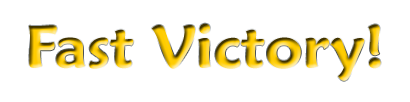
<style>
.page{position:relative;width:410px;height:102px;background:#ffffff}
.page>*{position:absolute;margin:0}
.t1{font:60px "MaiandraGD-DemiBold"}
</style>
<div class="page">
<p class="t1" style="left:29px;top:23px;width:352px;height:58px">Fast Victory!</p>
</div>
